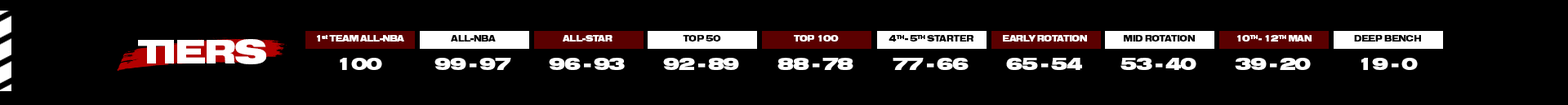
<style>
.page{position:relative;width:1568px;height:105px;background:#000000}
.page>*{position:absolute;margin:0}
.t1{font:35.5px "NimbusSanExt-Bla";letter-spacing:-0.06em;color:#ffffff}
.t2{font:8.7px "NimbusSanExt-Bla";letter-spacing:-0.06em;color:#ffffff;scale:0.96 1}
.t3{font:8.7px "NimbusSanExt-Bla";letter-spacing:-0.06em;color:#000000;scale:0.96 1}
.t4{font:18.2px "NimbusSanExt-Bla";letter-spacing:-0.06em;color:#ffffff;scale:0.96 1}
</style>
<div class="page">
<p class="t1" style="left:138px;top:39px;width:128px;height:26px">TIERS</p>
<p class="t2" style="left:317px;top:35px;width:87px;height:7px">1st TEAM ALL-NBA</p>
<p class="t3" style="left:451px;top:35px;width:45px;height:7px">ALL-NBA</p>
<p class="t2" style="left:563px;top:35px;width:49px;height:7px">ALL-STAR</p>
<p class="t3" style="left:683px;top:35px;width:38px;height:7px">TOP 50</p>
<p class="t2" style="left:794px;top:35px;width:45px;height:7px">TOP 100</p>
<p class="t3" style="left:889px;top:35px;width:84px;height:7px">4TH - 5TH STARTER</p>
<p class="t2" style="left:1003px;top:35px;width:84px;height:7px">EARLY ROTATION</p>
<p class="t3" style="left:1124px;top:35px;width:71px;height:7px">MID ROTATION</p>
<p class="t2" style="left:1237px;top:35px;width:75px;height:7px">10TH - 12TH MAN</p>
<p class="t3" style="left:1354px;top:35px;width:67px;height:7px">DEEP BENCH</p>
<p class="t4" style="left:340px;top:58px;width:42px;height:12px">100</p>
<p class="t4" style="left:434px;top:58px;width:77px;height:12px">99 - 97</p>
<p class="t4" style="left:549px;top:58px;width:76px;height:12px">96 - 93</p>
<p class="t4" style="left:663px;top:58px;width:76px;height:12px">92 - 89</p>
<p class="t4" style="left:777px;top:58px;width:76px;height:12px">88 - 78</p>
<p class="t4" style="left:893px;top:58px;width:76px;height:12px">77 - 66</p>
<p class="t4" style="left:1006px;top:58px;width:76px;height:12px">65 - 54</p>
<p class="t4" style="left:1120px;top:58px;width:76px;height:12px">53 - 40</p>
<p class="t4" style="left:1235px;top:58px;width:76px;height:12px">39 - 20</p>
<p class="t4" style="left:1361px;top:58px;width:57px;height:12px">19 - 0</p>
</div>
